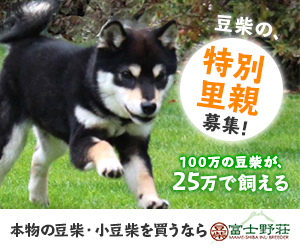
<style>
.page{position:relative;width:300px;height:250px;background:#ffffff}
.page>*{position:absolute;margin:0}
.t1{font:20px "TBCGoStd-ExBold";color:#ffffff}
.t2{font:32.9px/32.9px "TBCGoStd-ExBold";color:#ff8700}
.t3{font:19.7px "TBCGoStd-ExBold";color:#333333}
.t4{font:14px "TBCGoStd-ExBold";letter-spacing:0.05em;color:#ffffff}
.t5{font:19.4px "TBCGoStd-ExBold";letter-spacing:-0.015em;color:#ffffff}
.t6{font:16.2px "TBCGoStd-ExBold";letter-spacing:0.125em;color:#ffffff}
.t7{font:24px "TBCGoStd-ExBold";letter-spacing:-0.015em;color:#ffffff}
.t8{font:16px "TBCGoStd-ExBold";letter-spacing:-0.025em;color:#333333}
</style>
<div class="page">
<p class="t1" style="left:214px;top:14px;width:65px;height:26px;rotate:8deg">豆柴の、</p>
<p class="t2" style="left:196px;top:45px;width:69px;height:71px;text-align:center;rotate:10deg">特別<br>里親</p>
<p class="t3" style="left:202px;top:112px;width:46px;height:24px;rotate:10deg">募集!</p>
<p class="t4" style="left:180px;top:155px;width:102px;height:14px">100万の豆柴が、</p>
<p class="t5" style="left:172px;top:172px;width:116px;height:20px"><span class="t6"><br></span><span class="t7">25</span>万で飼える</p>
<p class="t8" style="left:10px;top:223px;width:197px;height:15px">本物の豆柴・小豆柴を買うなら</p>
</div>
